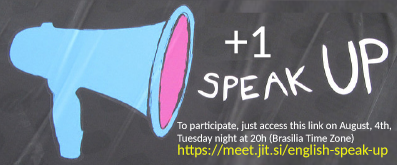
<style>
.page{position:relative;width:397px;height:165px}
.page>*{position:absolute;margin:0}
.t1{font:48px "Carlito";color:#ffffff}
.t2{font:10.7px "Carlito";color:#ffffff}
.t3{font:14.7px "Carlito";color:#eff20d}
</style>
<div class="page">
<p class="t1" style="left:225px;top:26px;width:46px;height:32px">+1</p>
<p class="t2" style="left:177px;top:121px;width:214px;height:23px">To participate, just access this link on August, 4th,<br>Tuesday night at 20h (Brasilia Time Zone)</p>
<p class="t3" style="left:178px;top:144px;width:210px;height:14px">https://meet.jit.si/english-speak-up</p>
</div>
